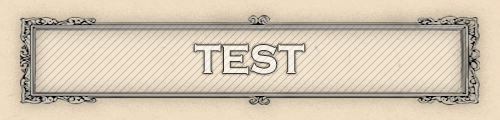
<style>
.page{position:relative;width:500px;height:120px}
.page>*{position:absolute;margin:0}
.t1{font:41px "CopperplateGothic-Bold";color:#f7f1e7;scale:0.94 1}
</style>
<div class="page">
<p class="t1" style="left:194px;top:44px;width:111px;height:31px">TEST</p>
</div>
